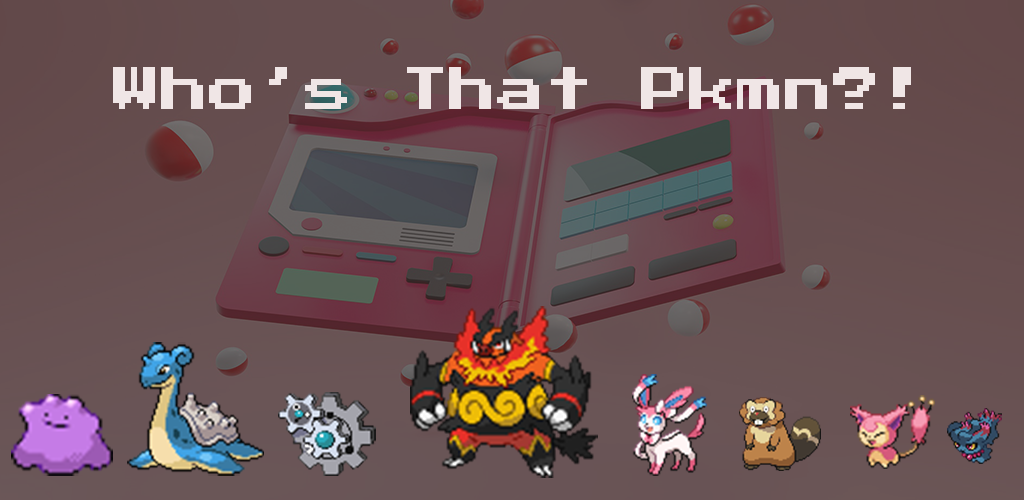
<style>
.page{position:relative;width:1024px;height:500px}
.page>*{position:absolute;margin:0}
.t1{font:48px "PressStart2P-Regular";color:#f0e6e6}
</style>
<div class="page">
<p class="t1" style="left:113px;top:67px;width:798px;height:42px">Who’s That Pkmn?!</p>
</div>
